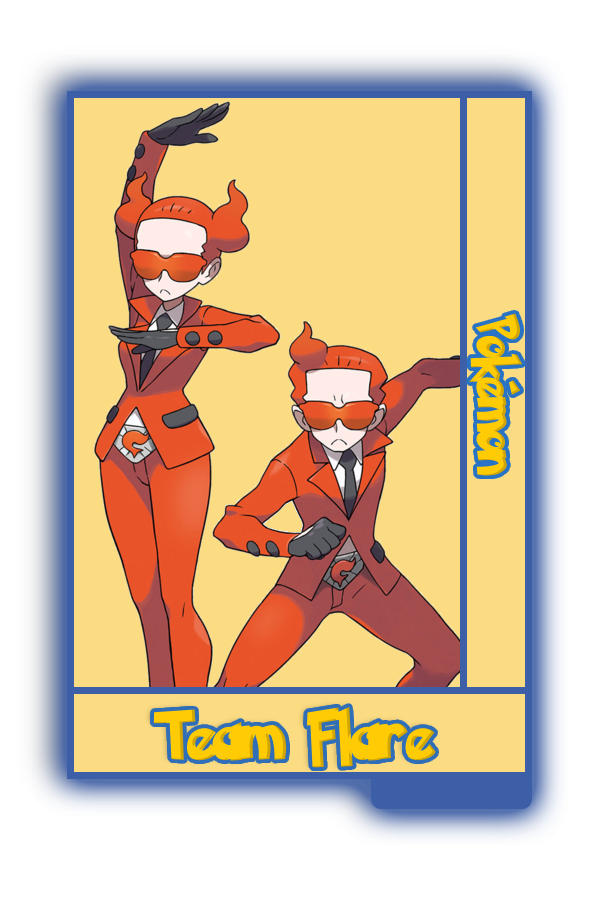
<style>
.page{position:relative;width:600px;height:900px;background:#fbdc83}
.page>*{position:absolute;margin:0}
.t1{font:48.8px "PokemonSolidNormal";color:#ffcb05;scale:0.8 1}
.t2{font:56.6px "PokemonSolidNormal";color:#ffcb05;scale:0.92 1}
</style>
<div class="page">
<p class="t1" style="left:469px;top:313px;width:54px;height:163px;rotate:90deg">Pokémon</p>
<p class="t2" style="left:153px;top:706px;width:283px;height:62px">Team Flare</p>
</div>
